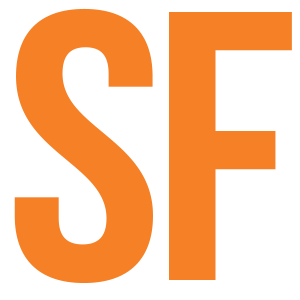
<style>
.page{position:relative;width:300px;height:300px;background:#ffffff}
.page>*{position:absolute;margin:0}
.t1{font:382.4px "BebasNeue";letter-spacing:-0.025em;color:#f58026;scale:1.1 1}
</style>
<div class="page">
<p class="t1" style="left:14px;top:8px;width:278px;height:276px">SF</p>
</div>
